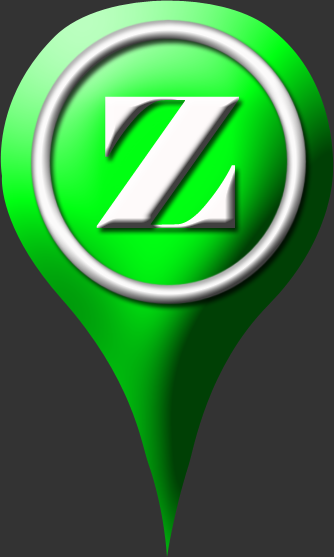
<style>
.page{position:relative;width:334px;height:557px;background:#333333}
.page>*{position:absolute;margin:0}
.t1{font:180px "Elephant-Regular";color:#fefafa}
</style>
<div class="page">
<p class="t1" style="left:96px;top:96px;width:143px;height:132px">Z</p>
</div>
